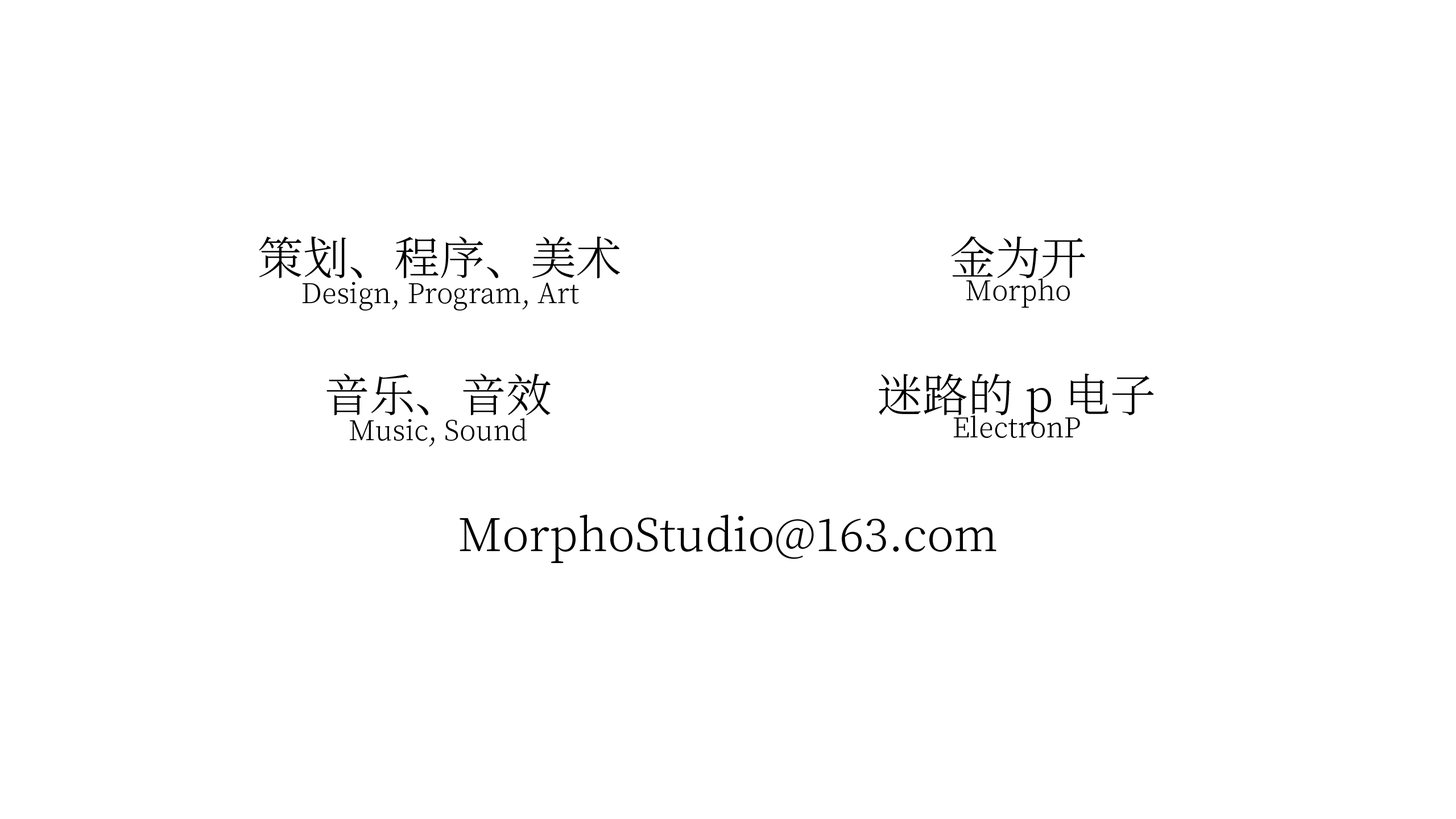
<style>
.page{position:relative;width:1456px;height:819px;background:#ffffff}
.page>*{position:absolute;margin:0}
.t1{font:45.5px "SourceHanSerifCN-Light";color:#000000}
.t2{font:27.3px "SourceHanSerifCN-Light";color:#000000}
</style>
<div class="page">
<p class="t1" style="left:259px;top:236px;width:361px;height:43px">策划、程序、美术</p>
<p class="t1" style="left:951px;top:236px;width:134px;height:42px">金为开</p>
<p class="t2" style="left:302px;top:282px;width:277px;height:29px">Design, Program, Art</p>
<p class="t2" style="left:966px;top:278px;width:104px;height:30px">Morpho</p>
<p class="t1" style="left:326px;top:374px;width:225px;height:41px">音乐、音效</p>
<p class="t1" style="left:879px;top:373px;width:275px;height:51px">迷路的p电子</p>
<p class="t2" style="left:350px;top:418px;width:177px;height:29px">Music, Sound</p>
<p class="t2" style="left:953px;top:415px;width:127px;height:23px">ElectronP</p>
<p class="t1" style="left:460px;top:514px;width:536px;height:49px">MorphoStudio@163.com</p>
</div>
